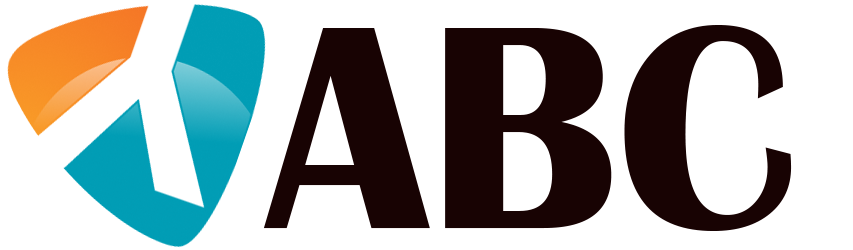
<style>
.page{position:relative;width:853px;height:250px;background:#ffffff}
.page>*{position:absolute;margin:0}
.t1{font:300px "BritannicBold";color:#180303}
</style>
<div class="page">
<p class="t1" style="left:263px;top:25px;width:529px;height:206px">ABC</p>
</div>
